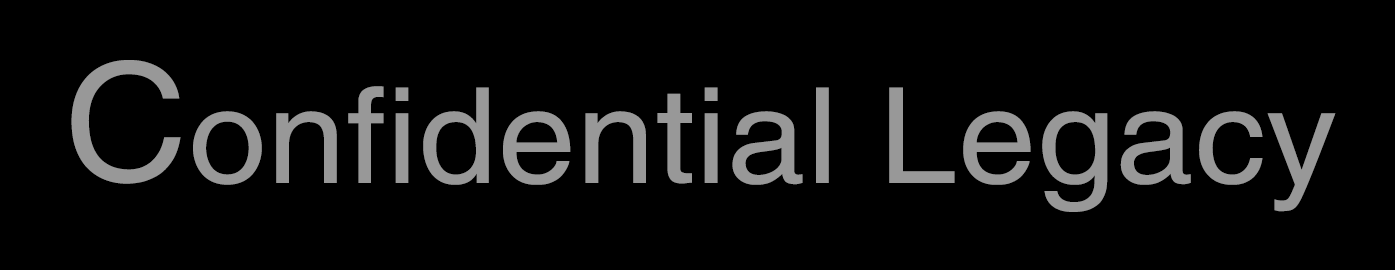
<style>
.page{position:relative;width:1395px;height:270px;background:#000000}
.page>*{position:absolute;margin:0}
.t1{font:163.4px "Helvetica";letter-spacing:0.005em;color:#989898;scale:1.04 1}
.t2{font:132.5px "Helvetica";letter-spacing:0.005em;color:#989898;scale:1.06 1}
</style>
<div class="page">
<p class="t1" style="left:71px;top:60px;width:110px;height:124px">C</p>
<p class="t2" style="left:193px;top:86px;width:1143px;height:126px">onfidential Legacy</p>
</div>
